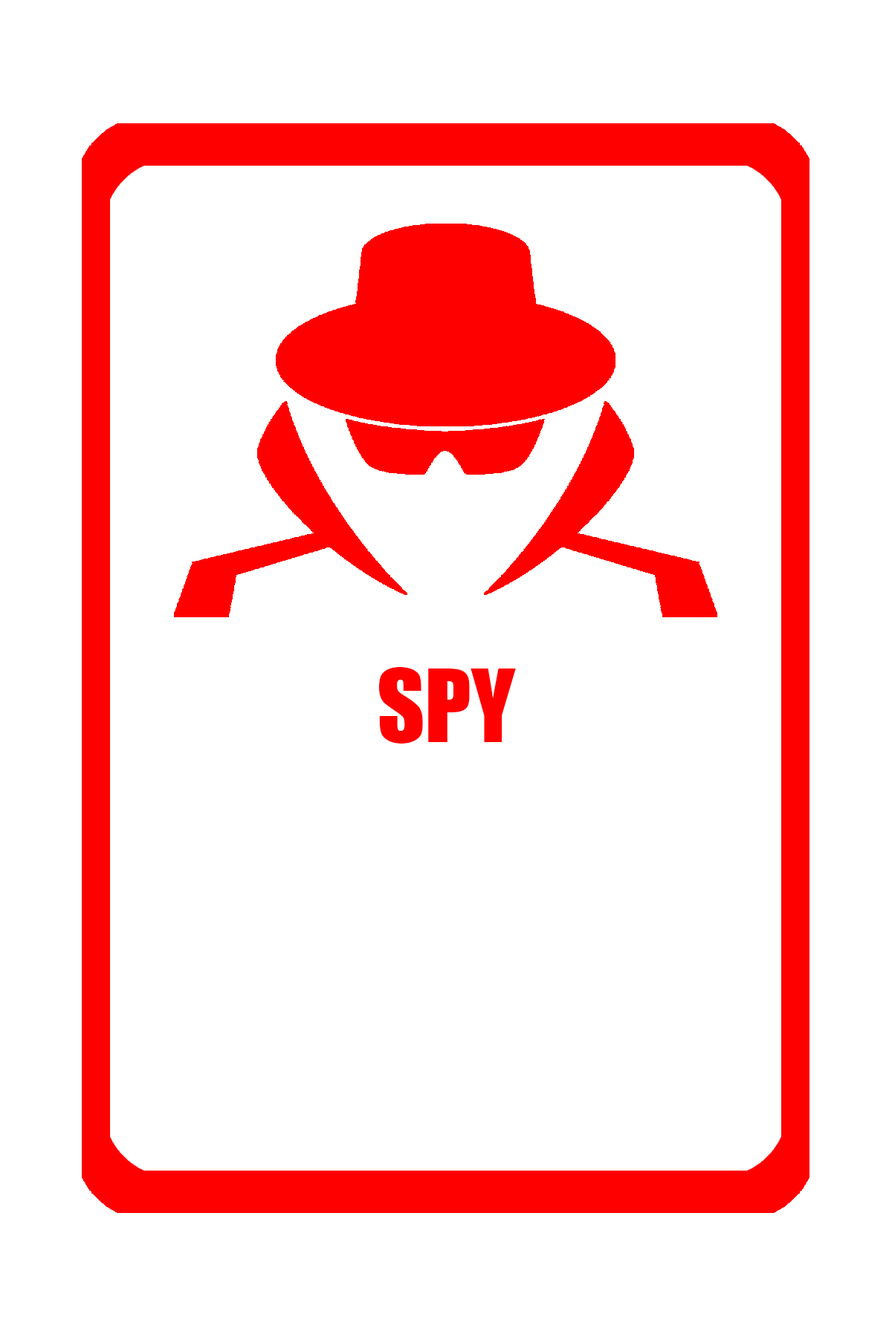
<style>
.page{position:relative;width:892px;height:1337px;background:#ffffff}
.page>*{position:absolute;margin:0}
.t1{font:92.9px "Impact";color:#ff0000}
</style>
<div class="page">
<p class="t1" style="left:378px;top:667px;width:138px;height:77px">SPY</p>
</div>
